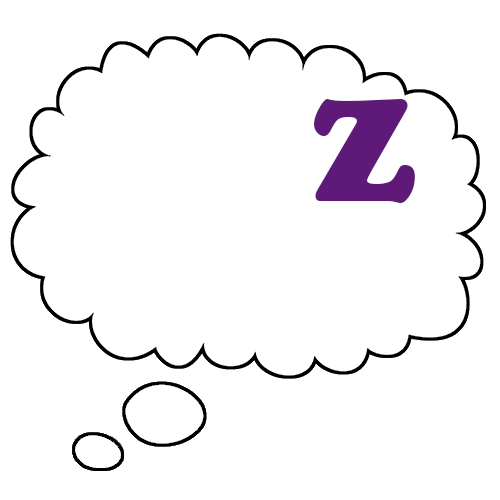
<style>
.page{position:relative;width:500px;height:500px;background:#ffffff}
.page>*{position:absolute;margin:0}
.t1{font:150px "CooperBlack";color:#5f1a79}
</style>
<div class="page">
<p class="t1" style="left:314px;top:99px;width:101px;height:104px">Z</p>
</div>
